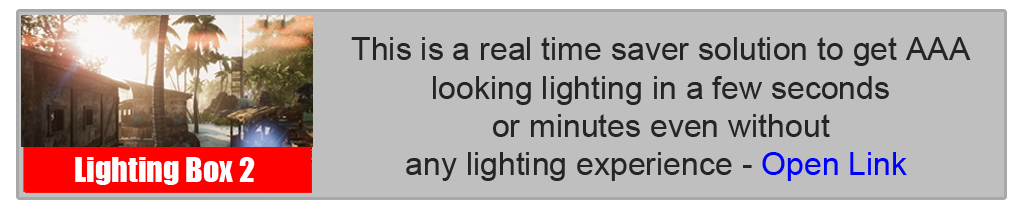
<style>
.page{position:relative;width:1024px;height:210px;background:#bfbfbf}
.page>*{position:absolute;margin:0}
.t1{font:32px "ArialMT";color:#252525}
.t2{font:32px "ArialMT";color:#0000ff}
.t3{font:32px "Impact";color:#ffffff}
</style>
<div class="page">
<p class="t1" style="left:351px;top:37px;width:620px;height:144px;text-align:center">This is a real time saver solution to get AAA <br>looking lighting in a few seconds <br>or minutes even without <br>any lighting experience - <span class="t2">Open Link</span></p>
<p class="t3" style="left:75px;top:157px;width:180px;height:28px">Lighting Box 2</p>
</div>
